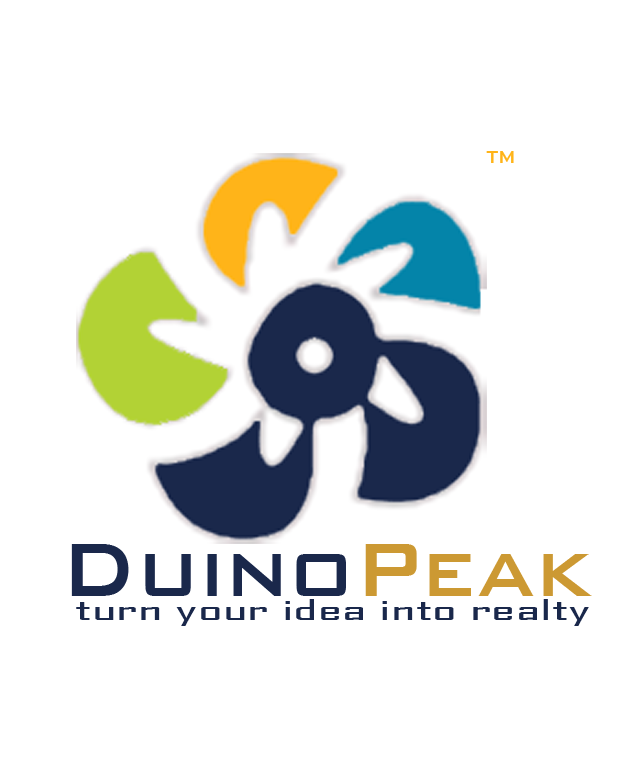
<style>
.page{position:relative;width:634px;height:780px;background:#ffffff}
.page>*{position:absolute;margin:0}
.t1{font:23.2px "BankGothicBT-Medium";color:#ffb419;scale:0.8 1}
.t2{font:100.1px "BankGothicBT-Medium";color:#1a284b;scale:0.9 1}
.t3{font:100.1px "BankGothicBT-Medium";color:#cc9933;scale:0.9 1}
.t4{font:27.7px "AgencyFB-Reg";color:#1a284b;scale:2.35 1}
</style>
<div class="page">
<p class="t1" style="left:486px;top:151px;width:28px;height:12px">TM</p>
<p class="t2" style="left:71px;top:544px;width:521px;height:52px">Duino<span class="t3">Peak</span></p>
<p class="t4" style="left:76px;top:599px;width:513px;height:27px">turn your idea into realty</p>
</div>
